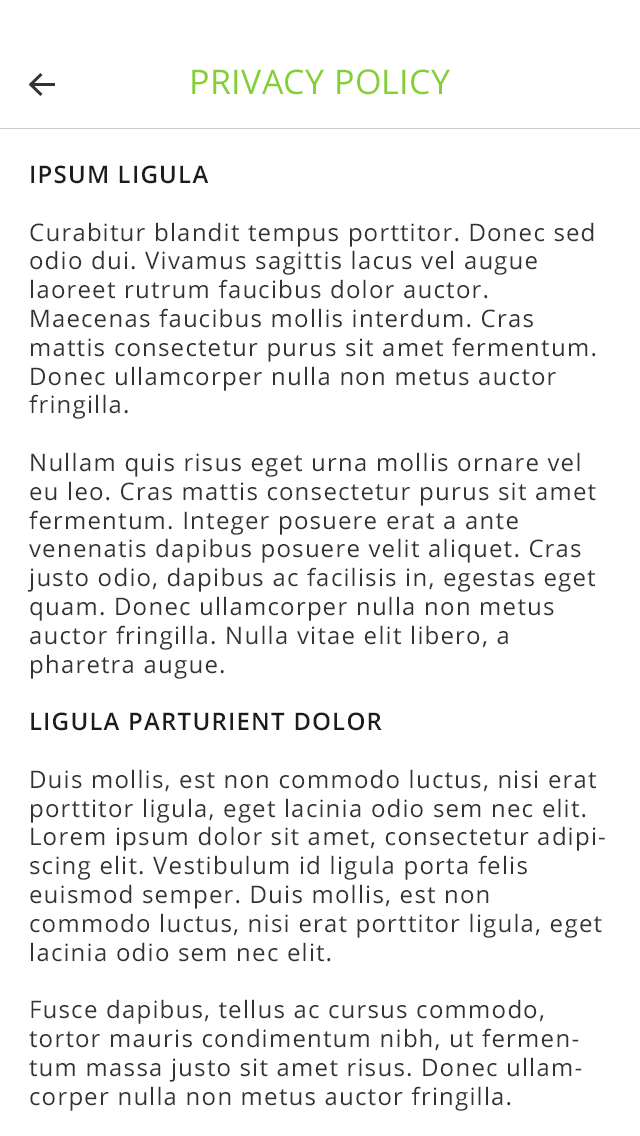
<style>
.page{position:relative;width:640px;height:1136px;background:#ffffff}
.page>*{position:absolute;margin:0}
.t1{font:34px "OpenSans";letter-spacing:0.01em;color:#84d033;text-transform:uppercase}
.t2{font:24px "OpenSans";letter-spacing:0.05em;color:#333333}
.t3{font:24px "OpenSans-Semibold";letter-spacing:0.05em;color:#1c1c1c;text-transform:uppercase}
</style>
<div class="page">
<p class="t1" style="left:192px;top:69px;width:258px;height:26px">PRIVACY POLICY</p>
<p class="t2" style="left:27px;top:165px;width:578px;height:946px"><span class="t3">Ipsum Ligula<br><br></span>Curabitur blandit tempus porttitor. Donec sed odio dui. Vivamus sagittis lacus vel augue laoreet rutrum faucibus dolor auctor. Maecenas faucibus mollis interdum. Cras mattis consectetur purus sit amet fermentum. Donec ullamcorper nulla non metus auctor fringilla.<br><br>Nullam quis risus eget urna mollis ornare vel eu leo. Cras mattis consectetur purus sit amet fermentum. Integer posuere erat a ante venenatis dapibus posuere velit aliquet. Cras justo odio, dapibus ac facilisis in, egestas eget quam. Donec ullamcorper nulla non metus auctor fringilla. Nulla vitae elit libero, a pharetra augue.<br><br><span class="t3">Ligula Parturient Dolor<br><br></span>Duis mollis, est non commodo luctus, nisi erat porttitor ligula, eget lacinia odio sem nec elit. Lorem ipsum dolor sit amet, consectetur adipiscing elit. Vestibulum id ligula porta felis euismod semper. Duis mollis, est non commodo luctus, nisi erat porttitor ligula, eget lacinia odio sem nec elit.<br><br>Fusce dapibus, tellus ac cursus commodo, tortor mauris condimentum nibh, ut fermentum massa justo sit amet risus. Donec ullamcorper nulla non metus auctor fringilla.</p>
</div>
